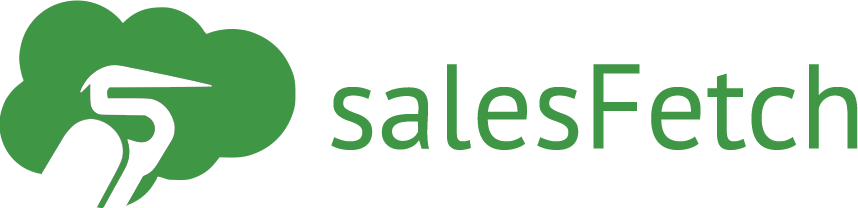
<style>
.page{position:relative;width:858px;height:208px;background:#ffffff}
.page>*{position:absolute;margin:0}
.t1{font:120px "PTSans-Regular";color:#3f9645}
</style>
<div class="page">
<p class="t1" style="left:331px;top:64px;width:527px;height:86px">salesFetch</p>
</div>
